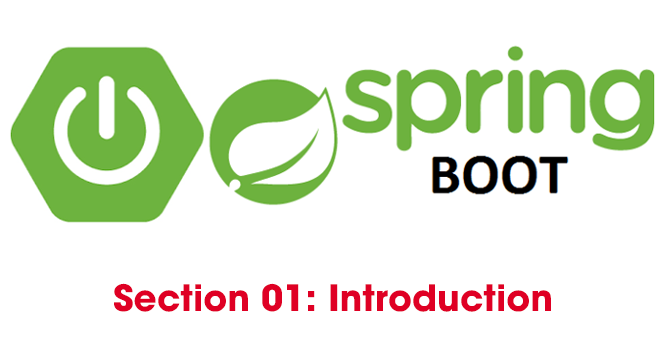
<style>
.page{position:relative;width:667px;height:349px;background:#ffffff}
.page>*{position:absolute;margin:0}
.t1{font:36px "UTMAvoBold";color:#df0024}
</style>
<div class="page">
<p class="t1" style="left:114px;top:283px;width:437px;height:29px">Section 01: Introduction</p>
</div>
